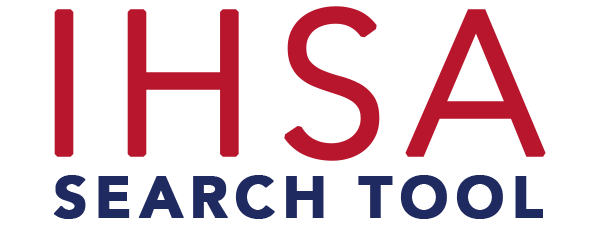
<style>
.page{position:relative;width:600px;height:227px;background:#ffffff}
.page>*{position:absolute;margin:0}
.t1{font:200px "Avenir-Light";letter-spacing:0.075em;color:#b7162c;text-transform:uppercase;font-weight:bold}
.t2{font:58.3px "Avenir-Black";letter-spacing:0.1em;color:#1f2a60;text-transform:uppercase;font-weight:bold}
</style>
<div class="page">
<p class="t1" style="left:54px;top:6px;width:492px;height:155px">IHSA</p>
<p class="t2" style="left:54px;top:175px;width:489px;height:44px">search tool</p>
</div>
